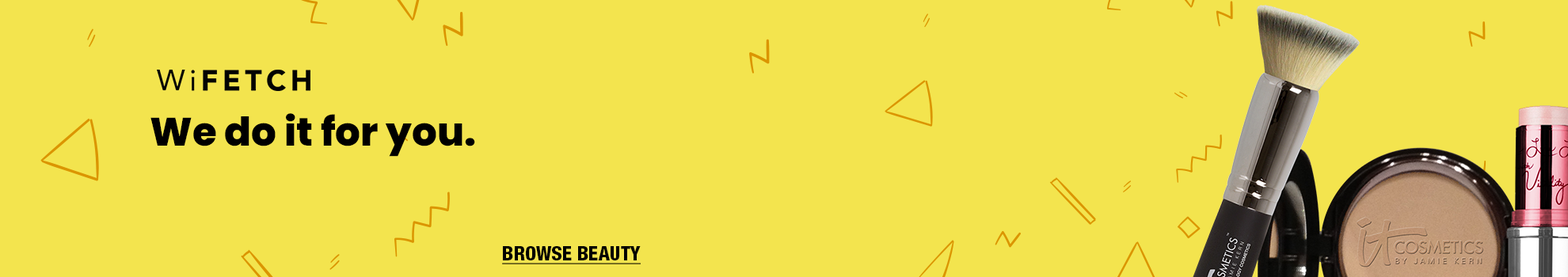
<style>
.page{position:relative;width:1568px;height:277px;background:#f3e44e}
.page>*{position:absolute;margin:0}
.t1{font:39.6px "Poppins-ExtraBold";color:#000000}
.t2{font:19.8px "HelveticaNeueLTStd-HvCn";color:#000000;text-decoration:underline}
</style>
<div class="page">
<p class="t1" style="left:150px;top:113px;width:325px;height:44px">We do it for you.</p>
<p class="t2" style="left:502px;top:246px;width:139px;height:19px">BROWSE BEAUTY</p>
</div>
